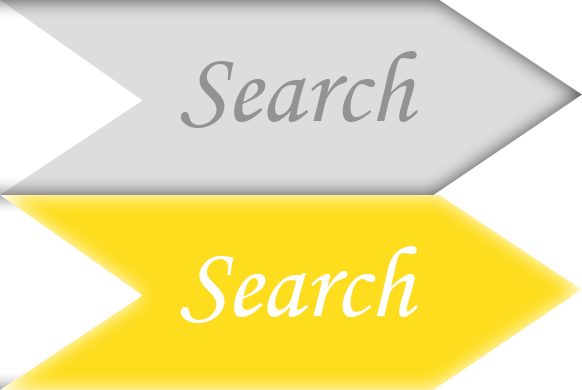
<style>
.page{position:relative;width:582px;height:390px;background:#ffffff}
.page>*{position:absolute;margin:0}
.t1{font:102px "MonotypeCorsiva";color:#939393}
.t2{font:102px "MonotypeCorsiva";color:#ffffff}
</style>
<div class="page">
<p class="t1" style="left:180px;top:51px;width:238px;height:77px">Search</p>
<p class="t2" style="left:180px;top:246px;width:238px;height:77px">Search</p>
</div>
